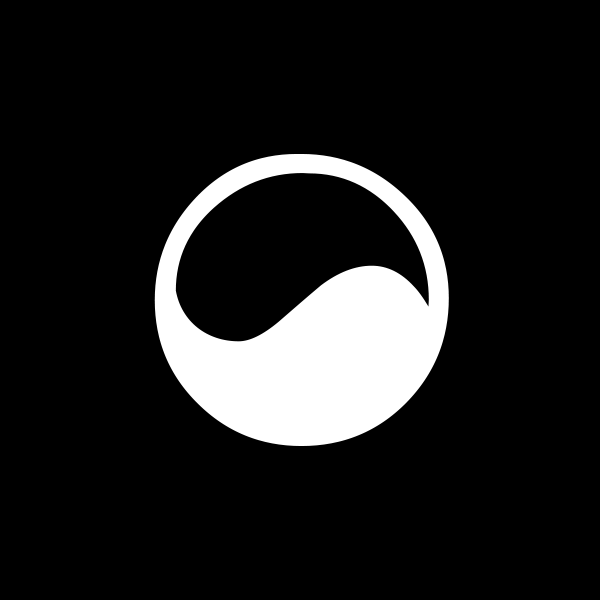
<style>
.page{position:relative;width:600px;height:600px;background:#000000}
.page>*{position:absolute;margin:0}
.t1{font:350px "AppleGothic";color:#ffffff}
</style>
<div class="page">
<p class="t1" style="left:154px;top:154px;width:295px;height:292px">☯</p>
</div>
